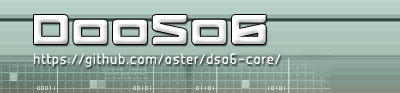
<style>
.page{position:relative;width:400px;height:93px}
.page>*{position:absolute;margin:0}
.t1{font:48px "Logofontik4F";letter-spacing:0.025em;color:#ffffff}
.t2{font:12px "JUICERegular";letter-spacing:0.025em;color:#ffffff}
</style>
<div class="page">
<p class="t1" style="left:34px;top:15px;width:232px;height:29px">DooSo6</p>
<p class="t2" style="left:34px;top:53px;width:246px;height:14px">https://github.com/oster/dso6-core/</p>
</div>
